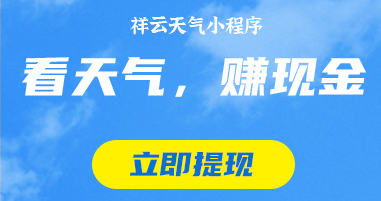
<style>
.page{position:relative;width:381px;height:201px}
.page>*{position:absolute;margin:0}
.t1{font:19px "jiangxizhuokai-Regular";color:#ffffff;text-transform:uppercase}
.t2{font:53px "YouSheBiaoTiHei";color:#ffffff;text-transform:uppercase}
.t3{font:34px "YouSheBiaoTiHei";color:#0b6ed1;text-transform:uppercase}
</style>
<div class="page">
<p class="t1" style="left:130px;top:16px;width:133px;height:19px">祥云天气小程序</p>
<p class="t2" style="left:22px;top:57px;width:344px;height:40px">看天气，赚现金</p>
<p class="t3" style="left:130px;top:151px;width:124px;height:26px">立即提现</p>
</div>
